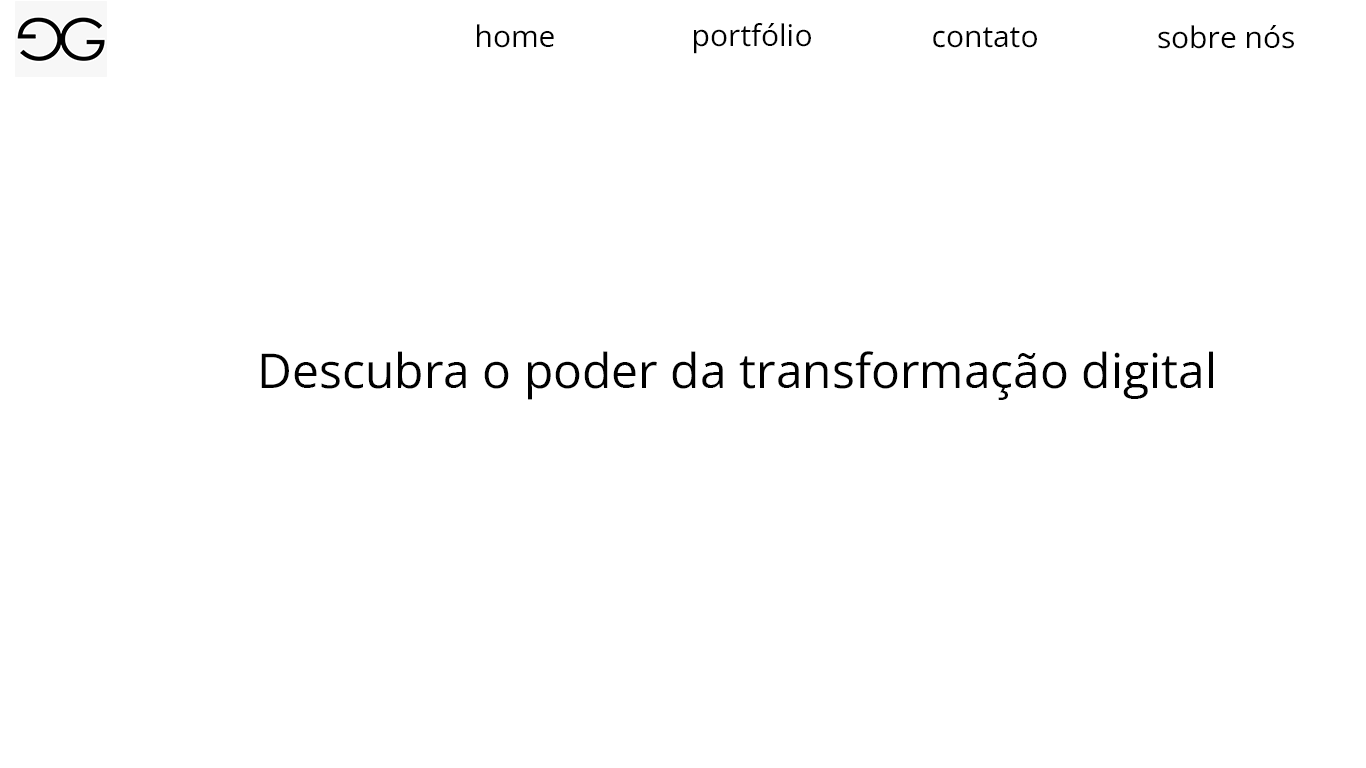
<style>
.page{position:relative;width:1366px;height:768px;background:#ffffff}
.page>*{position:absolute;margin:0}
.t1{font:30px "OpenSans-Regular";color:#000000}
.t2{font:48px "OpenSans-Regular";color:#000000}
</style>
<div class="page">
<p class="t1" style="left:477px;top:24px;width:77px;height:24px">home</p>
<p class="t1" style="left:694px;top:23px;width:117px;height:31px">portfólio</p>
<p class="t1" style="left:933px;top:27px;width:104px;height:21px">contato</p>
<p class="t1" style="left:1158px;top:25px;width:136px;height:24px">sobre nós</p>
<p class="t2" style="left:261px;top:351px;width:952px;height:49px">Descubra o poder da transformação digital</p>
</div>
